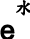
<style>
.page{position:relative;width:30px;height:39px;background:#ffffff}
.page>*{position:absolute;margin:0}
.t1{font:27px "ArialMT";color:#000000;font-weight:bold}
</style>
<div class="page">
<p class="t1" style="left:0px;top:24px;width:15px;height:17px">e</p>
</div>
